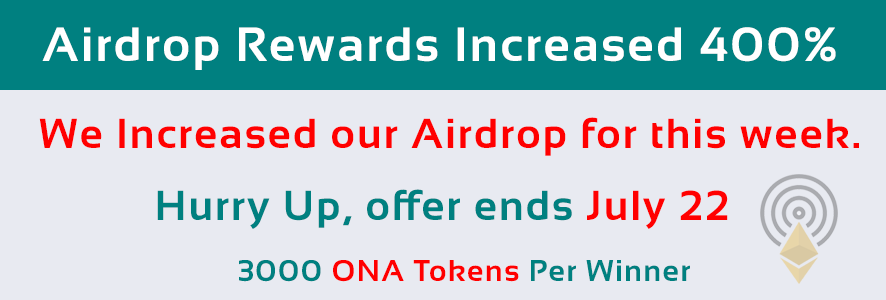
<style>
.page{position:relative;width:886px;height:300px;background:#e8eaf1}
.page>*{position:absolute;margin:0}
.t1{font:48px "Sansation-Bold";letter-spacing:0.05em;color:#ffffff}
.t2{font:42px "Sansation-Bold";letter-spacing:0.05em;color:#ff0000}
.t3{font:42px "Sansation-Bold";letter-spacing:0.05em;color:#008080}
.t4{font:30px "Sansation-Bold";letter-spacing:0.05em;color:#ff0000}
.t5{font:30px "Sansation-Bold";letter-spacing:0.05em;color:#008080}
</style>
<div class="page">
<p class="t1" style="left:42px;top:27px;width:794px;height:43px">Airdrop Rewards Increased 400%</p>
<p class="t2" style="left:39px;top:117px;width:820px;height:39px">We Increased our Airdrop for this week.</p>
<p class="t3" style="left:157px;top:189px;width:571px;height:40px">Hurry Up, offer ends <span class="t2">July 22</span></p>
<p class="t4" style="left:239px;top:260px;width:451px;height:22px"><span class="t5">3000 </span>ONA Tokens<span class="t5"> Per Winner</span></p>
</div>
